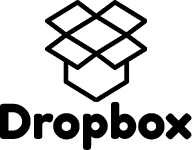
<style>
.page{position:relative;width:192px;height:150px;background:#ffffff}
.page>*{position:absolute;margin:0}
.t1{font:48px "FredokaOne-Regular";color:#000000}
</style>
<div class="page">
<p class="t1" style="left:0px;top:102px;width:192px;height:48px">Dropbox</p>
</div>
